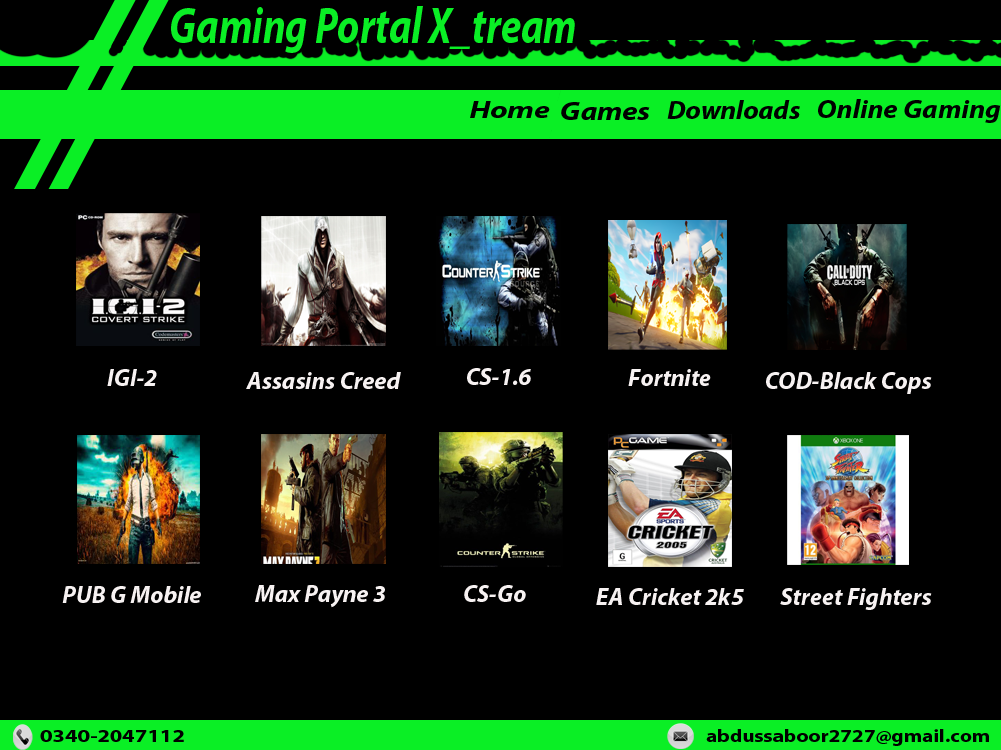
<style>
.page{position:relative;width:1001px;height:750px;background:#000000}
.page>*{position:absolute;margin:0}
.t1{font:51.2px "MyriadPro-BoldIt";color:#0aef25;scale:0.78 1}
.t2{font:24.1px "MyriadPro-BoldIt";color:#000000;scale:1.31 1}
.t3{font:26.5px "MyriadPro-BoldIt";color:#000000;scale:1.15 1}
.t4{font:25.8px "MyriadPro-BoldIt";color:#000000;scale:1.06 1}
.t5{font:25.8px "MyriadPro-BoldIt";color:#000000;scale:1.1 1}
.t6{font:24px "MyriadPro-BoldIt";color:#f7f2f2}
.t7{font:36px "MyriadPro-BoldIt";color:#f7f2f2}
.t8{font:18px "MyriadPro-Bold";color:#000000;scale:1.25 1}
.t9{font:18px "MyriadPro-Bold";color:#000000;scale:1.17 1}
</style>
<div class="page">
<p class="t1" style="left:171px;top:6px;width:404px;height:47px">Gaming Portal X_tream</p>
<p class="t2" style="left:470px;top:101px;width:80px;height:17px">Home</p>
<p class="t3" style="left:561px;top:102px;width:89px;height:18px">Games</p>
<p class="t4" style="left:667px;top:100px;width:133px;height:19px">Downloads</p>
<p class="t5" style="left:818px;top:99px;width:183px;height:24px">Online Gaming</p>
<p class="t6" style="left:107px;top:369px;width:50px;height:17px"><span class="t7"> </span> IGI-2</p>
<p class="t6" style="left:246px;top:372px;width:155px;height:17px">Assasins Creed</p>
<p class="t6" style="left:467px;top:368px;width:64px;height:17px">CS-1.6</p>
<p class="t6" style="left:628px;top:369px;width:83px;height:17px">Fortnite</p>
<p class="t6" style="left:766px;top:372px;width:166px;height:22px">COD-Black Cops</p>
<p class="t6" style="left:62px;top:586px;width:139px;height:17px">PUB G Mobile</p>
<p class="t6" style="left:255px;top:585px;width:130px;height:23px">Max Payne 3</p>
<p class="t6" style="left:464px;top:585px;width:62px;height:17px">CS-Go</p>
<p class="t6" style="left:596px;top:588px;width:148px;height:17px">EA Cricket 2k5</p>
<p class="t6" style="left:780px;top:588px;width:152px;height:22px">Street Fighters</p>
<p class="t8" style="left:40px;top:730px;width:144px;height:12px">0340-2047112</p>
<p class="t9" style="left:706px;top:729px;width:283px;height:17px">abdussaboor2727@gmail.com</p>
</div>
